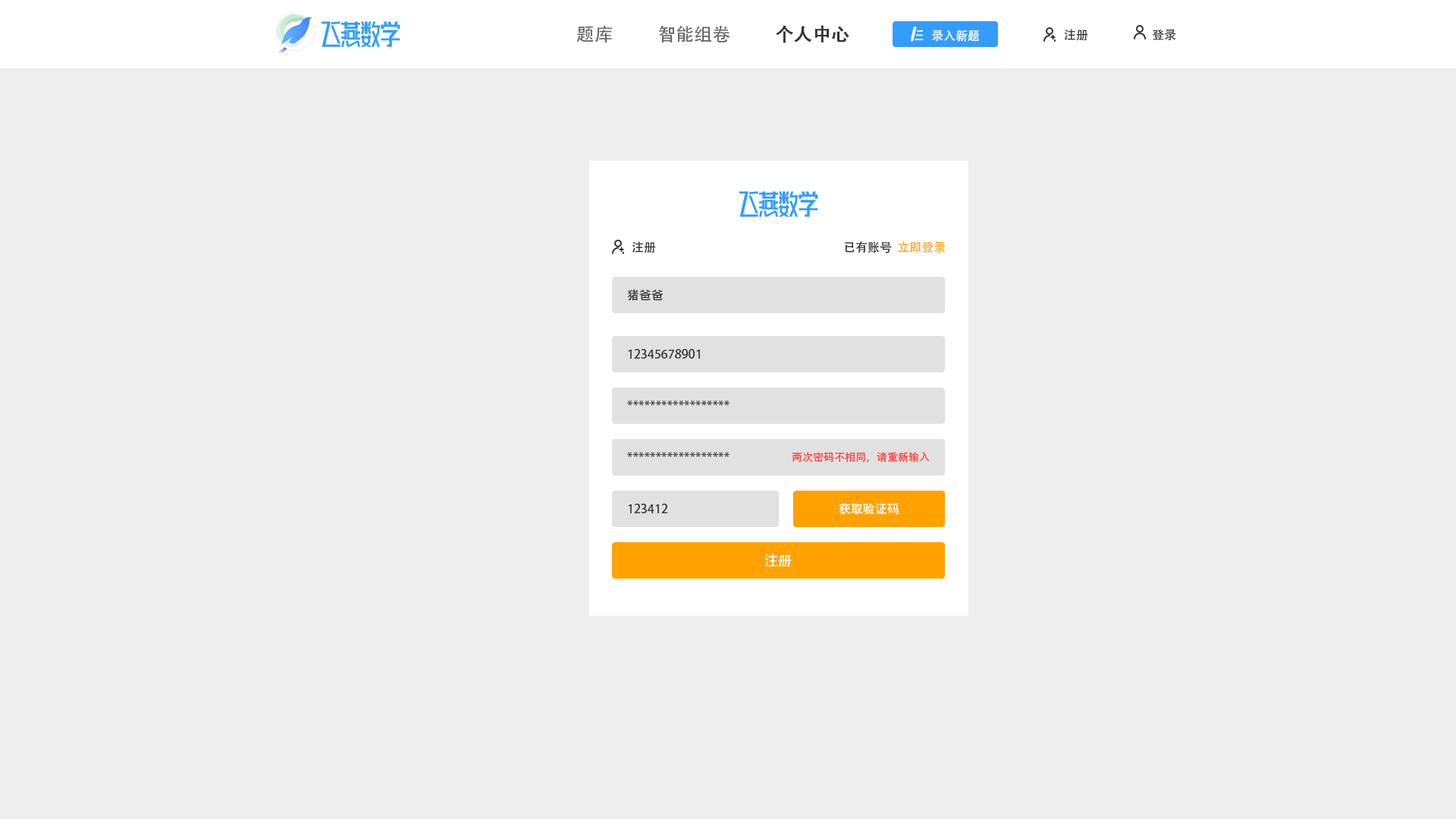
<style>
.page{position:relative;width:1456px;height:819px;background:#eeeeee}
.page>*{position:absolute;margin:0}
.t1{font:18.2px "AdobeHeitiStd-Regular";color:#666666}
.t2{font:18.2px "AdobeHeitiStd-Regular";color:#333333;font-weight:bold}
.t3{font:12.1px "AdobeHeitiStd-Regular";color:#ffffff}
.t4{font:12.1px "AdobeHeitiStd-Regular";color:#333333}
.t5{font:12.1px "AdobeHeitiStd-Regular";color:#ffa200}
.t6{font:10.6px "AdobeHeitiStd-Regular";color:#ff4242}
.t7{font:13.6px "AdobeHeitiStd-Regular";color:#ffffff}
</style>
<div class="page">
<p class="t1" style="left:576px;top:26px;width:36px;height:16px">题库</p>
<p class="t1" style="left:659px;top:25px;width:71px;height:17px">智能组卷</p>
<p class="t2" style="left:776px;top:25px;width:73px;height:18px">个人中心</p>
<p class="t3" style="left:932px;top:30px;width:47px;height:12px">录入新题</p>
<p class="t4" style="left:1064px;top:29px;width:24px;height:12px">注册</p>
<p class="t4" style="left:1152px;top:29px;width:24px;height:12px">登录</p>
<p class="t4" style="left:632px;top:241px;width:24px;height:12px">注册</p>
<p class="t4" style="left:845px;top:241px;width:101px;height:12px">已有账号  <span class="t5">立即登录</span></p>
<p class="t4" style="left:627px;top:289px;width:37px;height:12px">猪爸爸</p>
<p class="t4" style="left:628px;top:349px;width:72px;height:10px">12345678901</p>
<p class="t4" style="left:627px;top:400px;width:103px;height:6px">******************</p>
<p class="t4" style="left:627px;top:452px;width:103px;height:5px">******************</p>
<p class="t6" style="left:792px;top:452px;width:138px;height:11px">两次密码不相同，请重新输入</p>
<p class="t4" style="left:628px;top:504px;width:40px;height:9px">123412</p>
<p class="t3" style="left:839px;top:503px;width:60px;height:12px">获取验证码</p>
<p class="t7" style="left:765px;top:554px;width:27px;height:13px">注册</p>
</div>
